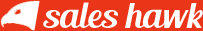
<style>
.page{position:relative;width:203px;height:31px;background:#ea3518}
.page>*{position:absolute;margin:0}
.t1{font:36px "BlendaScript";color:#ffffff}
</style>
<div class="page">
<p class="t1" style="left:43px;top:2px;width:160px;height:26px">sales hawk</p>
</div>
